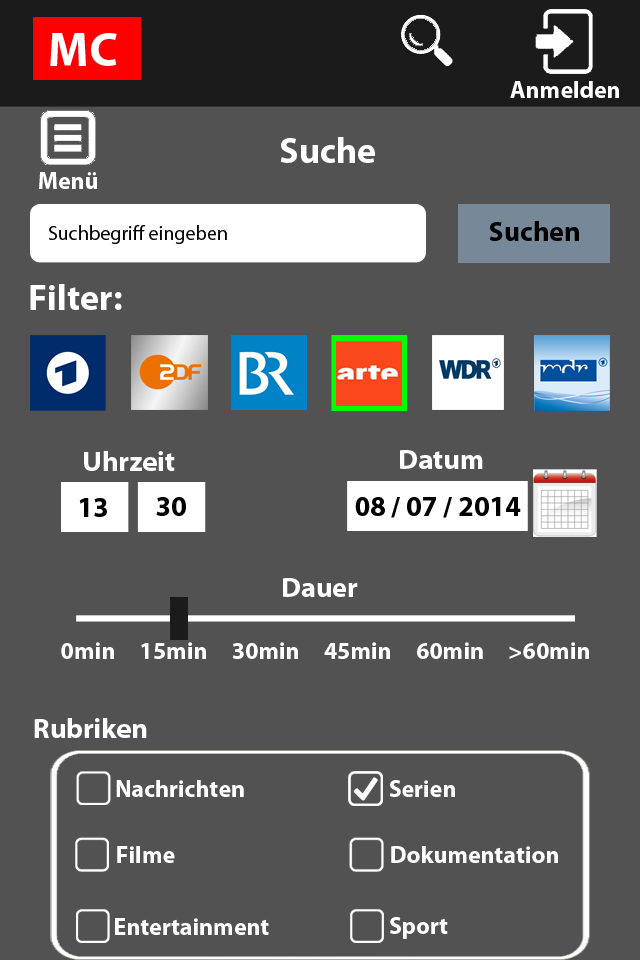
<style>
.page{position:relative;width:640px;height:960px;background:#525252}
.page>*{position:absolute;margin:0}
.t1{font:48px "MyriadPro-Bold";color:#ffffff}
.t2{font:24px "MyriadPro-Bold";color:#ffffff}
.t3{font:36px "MyriadPro-Bold";color:#ffffff}
.t4{font:28px "MyriadPro-Bold";color:#000001}
.t5{font:20px "MyriadPro-Regular";color:#000000}
.t6{font:28.2px "MyriadPro-Bold";color:#ffffff}
.t7{font:28.2px "MyriadPro-Bold";color:#000000}
</style>
<div class="page">
<p class="t1" style="left:50px;top:33px;width:67px;height:33px">MC</p>
<p class="t2" style="left:510px;top:81px;width:109px;height:17px">Anmelden</p>
<p class="t3" style="left:280px;top:137px;width:95px;height:26px">Suche</p>
<p class="t2" style="left:39px;top:172px;width:58px;height:17px">Menü</p>
<p class="t4" style="left:489px;top:221px;width:90px;height:20px">Suchen</p>
<p class="t5" style="left:49px;top:225px;width:178px;height:19px">Suchbegriff eingeben</p>
<p class="t3" style="left:30px;top:284px;width:92px;height:26px">Filter:</p>
<p class="t6" style="left:84px;top:451px;width:91px;height:20px">Uhrzeit</p>
<p class="t6" style="left:400px;top:450px;width:83px;height:19px">Datum</p>
<p class="t7" style="left:156px;top:497px;width:30px;height:19px">30</p>
<p class="t7" style="left:355px;top:497px;width:166px;height:21px">08 / 07 / 2014</p>
<p class="t7" style="left:79px;top:498px;width:28px;height:19px">13</p>
<p class="t6" style="left:283px;top:578px;width:75px;height:19px">Dauer</p>
<p class="t2" style="left:61px;top:642px;width:528px;height:17px">0min     15min     30min     45min     60min     &gt;60min</p>
<p class="t6" style="left:34px;top:718px;width:113px;height:20px">Rubriken</p>
<p class="t2" style="left:116px;top:780px;width:128px;height:17px">Nachrichten</p>
<p class="t2" style="left:389px;top:780px;width:66px;height:17px">Serien</p>
<p class="t2" style="left:117px;top:846px;width:58px;height:17px">Filme</p>
<p class="t2" style="left:391px;top:846px;width:167px;height:17px">Dokumentation</p>
<p class="t2" style="left:115px;top:918px;width:154px;height:17px">Entertainment</p>
<p class="t2" style="left:390px;top:917px;width:58px;height:22px">Sport</p>
</div>
